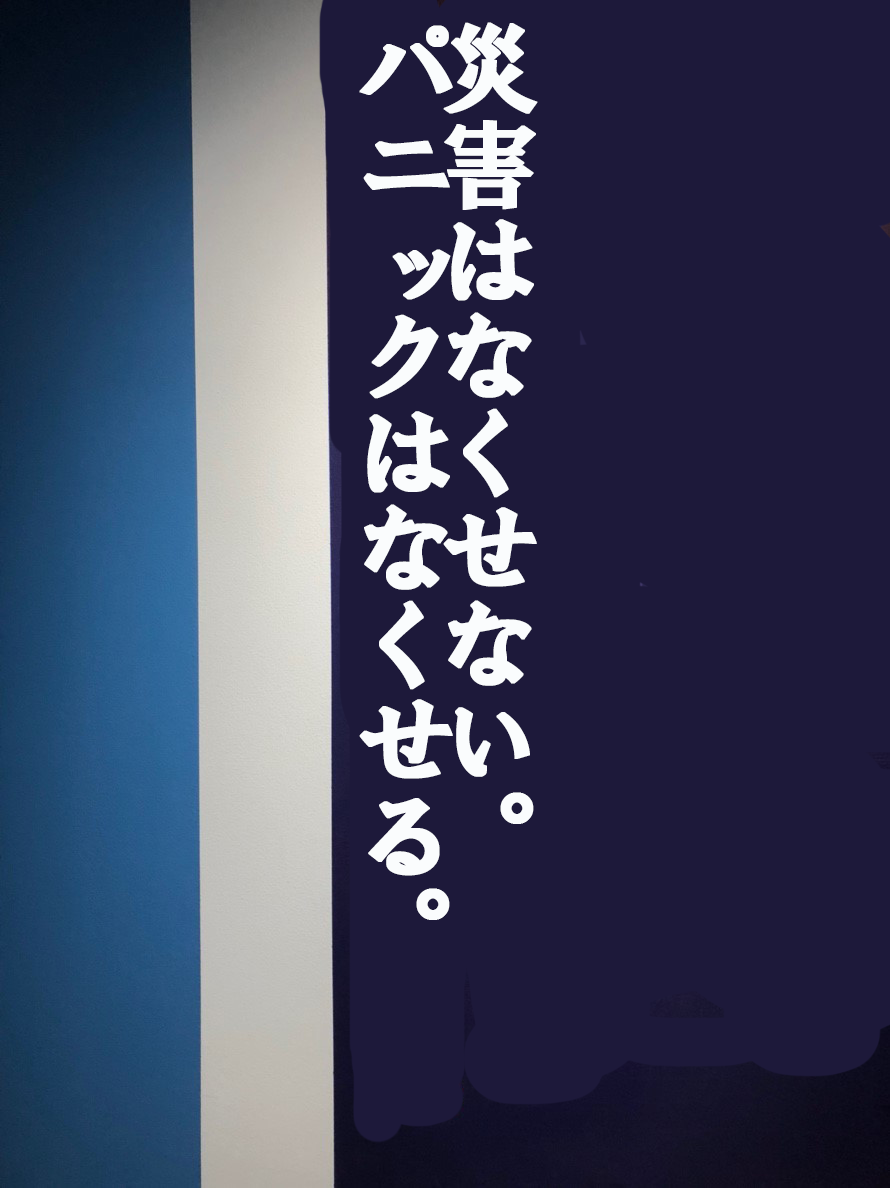
<style>
.page{position:relative;width:890px;height:1188px;background:#1d193a}
.page>*{position:absolute;margin:0}
.t1{font:96px "HGSSoeiPresenceEB";color:#fafcfd;font-weight:bold}
</style>
<div class="page">
<p class="t1" style="left:359px;top:22px;width:179px;height:898px">災害はなくせない。<br>パニックはなくせる。</p>
</div>
